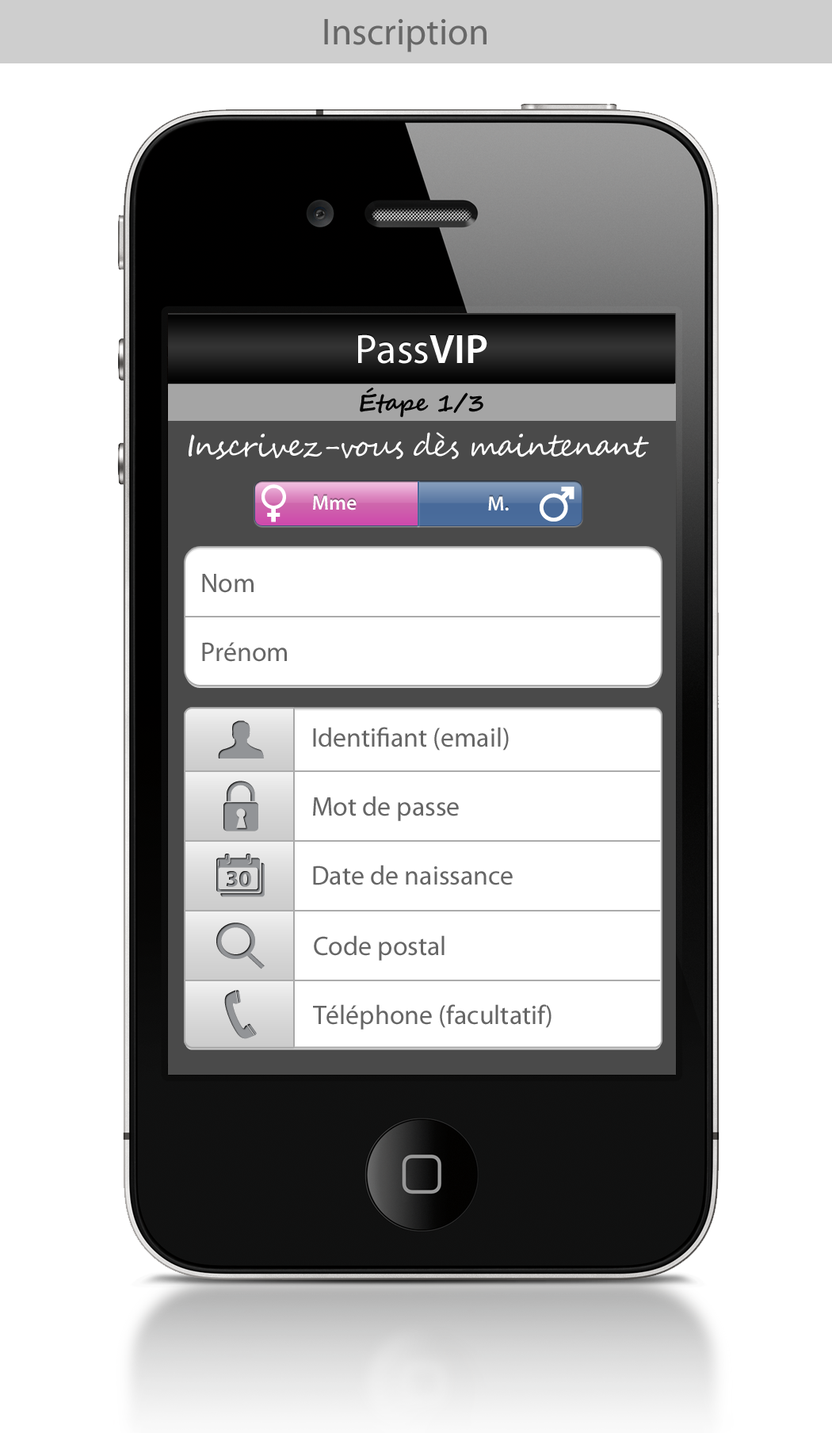
<style>
.page{position:relative;width:832px;height:1433px;background:#ffffff}
.page>*{position:absolute;margin:0}
.t1{font:37.7px "MyriadPro-Regular";color:#676767}
.t2{font:41.3px "MyriadPro-Regular";color:#ffffff}
.t3{font:41.3px "MyriadPro-Semibold";color:#ffffff}
.t4{font:23.8px "SegoeScript-Bold";color:#010101}
.t5{font:30.1px "SegoeScript";letter-spacing:-0.05em;color:#ffffff}
.t6{font:20.6px "MyriadPro-Semibold";color:#ffffff}
.t7{font:26.9px/69px "MyriadPro-Regular";color:#666666}
</style>
<div class="page">
<p class="t1" style="left:324px;top:19px;width:163px;height:33px">Inscription</p>
<p class="t2" style="left:358px;top:334px;width:129px;height:30px">Pass<span class="t3">VIP</span></p>
<p class="t4" style="left:360px;top:388px;width:123px;height:30px">Étape 1/3</p>
<p class="t5" style="left:189px;top:432px;width:460px;height:28px">Inscrivez-vous dès maintenant</p>
<p class="t6" style="left:313px;top:495px;width:44px;height:15px">Mme</p>
<p class="t6" style="left:488px;top:496px;width:21px;height:15px">M.</p>
<p class="t7" style="left:202px;top:574px;width:85px;height:88px">Nom<br>Prénom</p>
<p class="t7" style="left:313px;top:727px;width:200px;height:158px">Identifiant (email)<br>Mot de passe<br>Date de naissance</p>
<p class="t7" style="left:313px;top:935px;width:239px;height:95px">Code postal<br>Téléphone (facultatif)</p>
</div>
